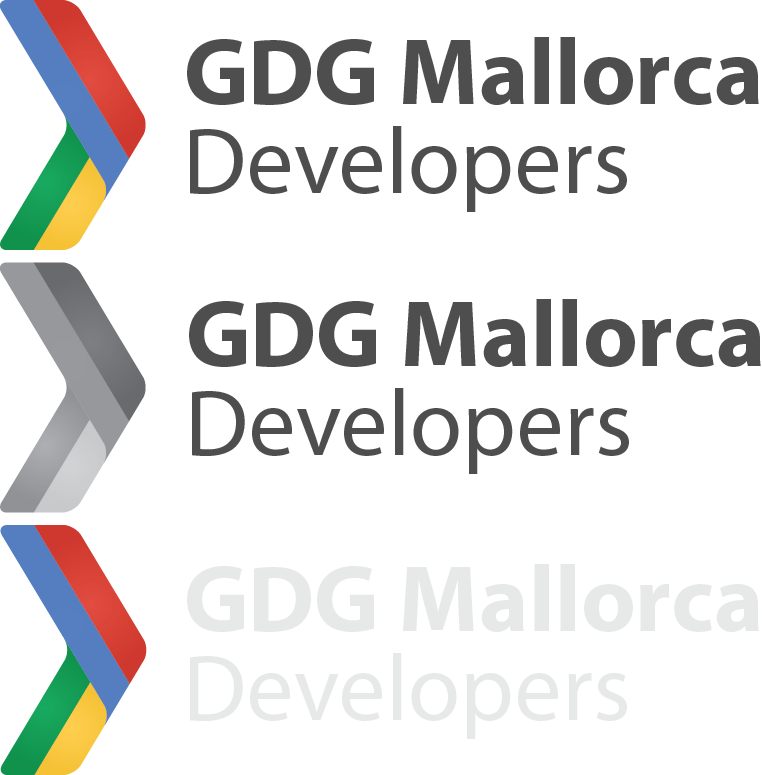
<style>
.page{position:relative;width:762px;height:775px;background:#ffffff}
.page>*{position:absolute;margin:0}
.t1{font:94.8px "MyriadPro-Bold";color:#4e4e4e}
.t2{font:94.8px "MyriadPro-Regular";color:#4e4e4e}
</style>
<div class="page">
<p class="t1" style="left:187px;top:37px;width:572px;height:68px">GDG Mallorca</p>
<p class="t2" style="left:190px;top:126px;width:437px;height:86px">Developers</p>
</div>
